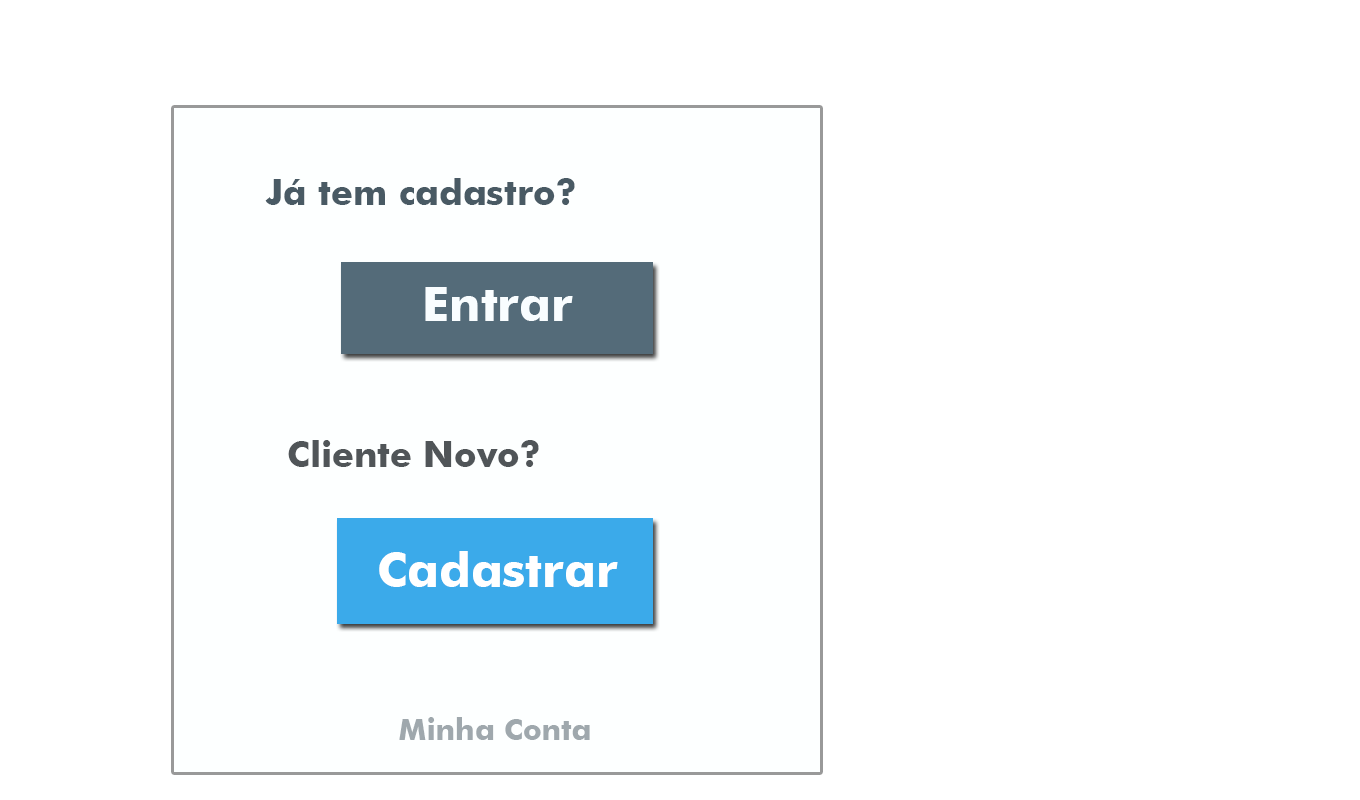
<style>
.page{position:relative;width:1360px;height:800px;background:#ffffff}
.page>*{position:absolute;margin:0}
.t1{font:36px "FuturaBT-Bold";color:#495a64}
.t2{font:48px "FuturaBT-Bold";color:#f9fdff}
.t3{font:36px "FuturaBT-Bold";color:#505558}
.t4{font:48px "FuturaBT-Bold";color:#ffffff}
.t5{font:30px "FuturaBT-Bold";color:#9fa8ad}
</style>
<div class="page">
<p class="t1" style="left:265px;top:178px;width:310px;height:27px">Já tem cadastro?</p>
<p class="t2" style="left:425px;top:287px;width:148px;height:34px">Entrar</p>
<p class="t3" style="left:288px;top:440px;width:251px;height:27px">Cliente Novo?</p>
<p class="t4" style="left:379px;top:551px;width:239px;height:36px">Cadastrar</p>
<p class="t5" style="left:399px;top:717px;width:191px;height:23px">Minha Conta</p>
</div>
